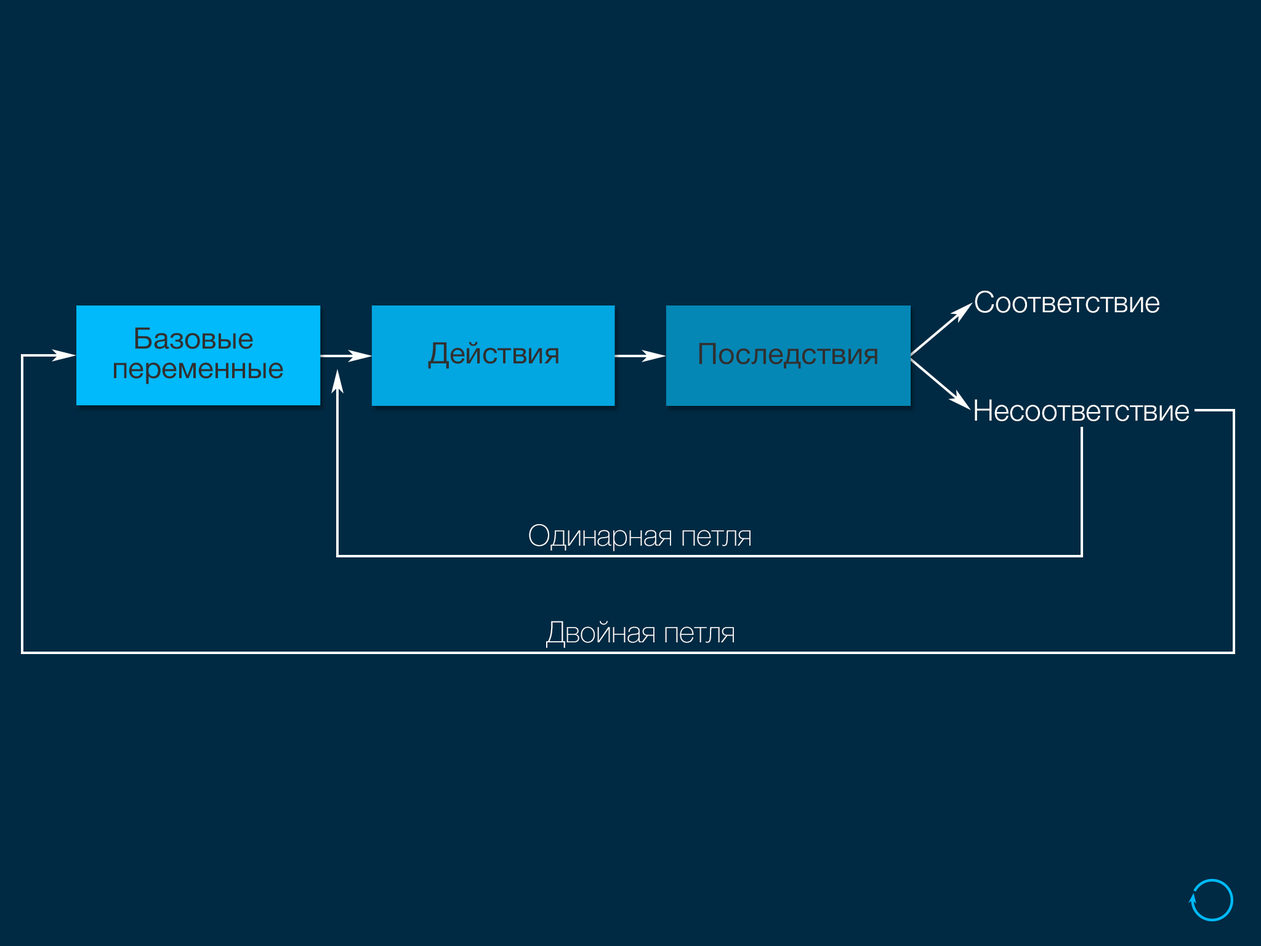
<style>
.page{position:relative;width:1261px;height:946px;background:#002a43}
.page>*{position:absolute;margin:0}
.t1{font:29.6px "HelveticaNeue-Light";color:#ffffff}
.t2{font:29.6px/29.6px "HelveticaNeue";color:#303030}
.t3{font:29.6px "HelveticaNeue";color:#303030}
.t4{font:29.6px "HelveticaNeue-Thin";color:#ffffff}
</style>
<div class="page">
<p class="t1" style="left:975px;top:291px;width:184px;height:22px">Соответствие</p>
<p class="t2" style="left:114px;top:327px;width:169px;height:57px;text-align:center">Базовые <br>переменные</p>
<p class="t3" style="left:428px;top:342px;width:130px;height:27px">Действия</p>
<p class="t3" style="left:699px;top:342px;width:178px;height:27px">Последствия</p>
<p class="t1" style="left:975px;top:399px;width:214px;height:22px">Несоответствие</p>
<p class="t4" style="left:529px;top:524px;width:222px;height:27px">Одинарная петля</p>
<p class="t4" style="left:546px;top:621px;width:188px;height:27px">Двойная петля</p>
</div>
